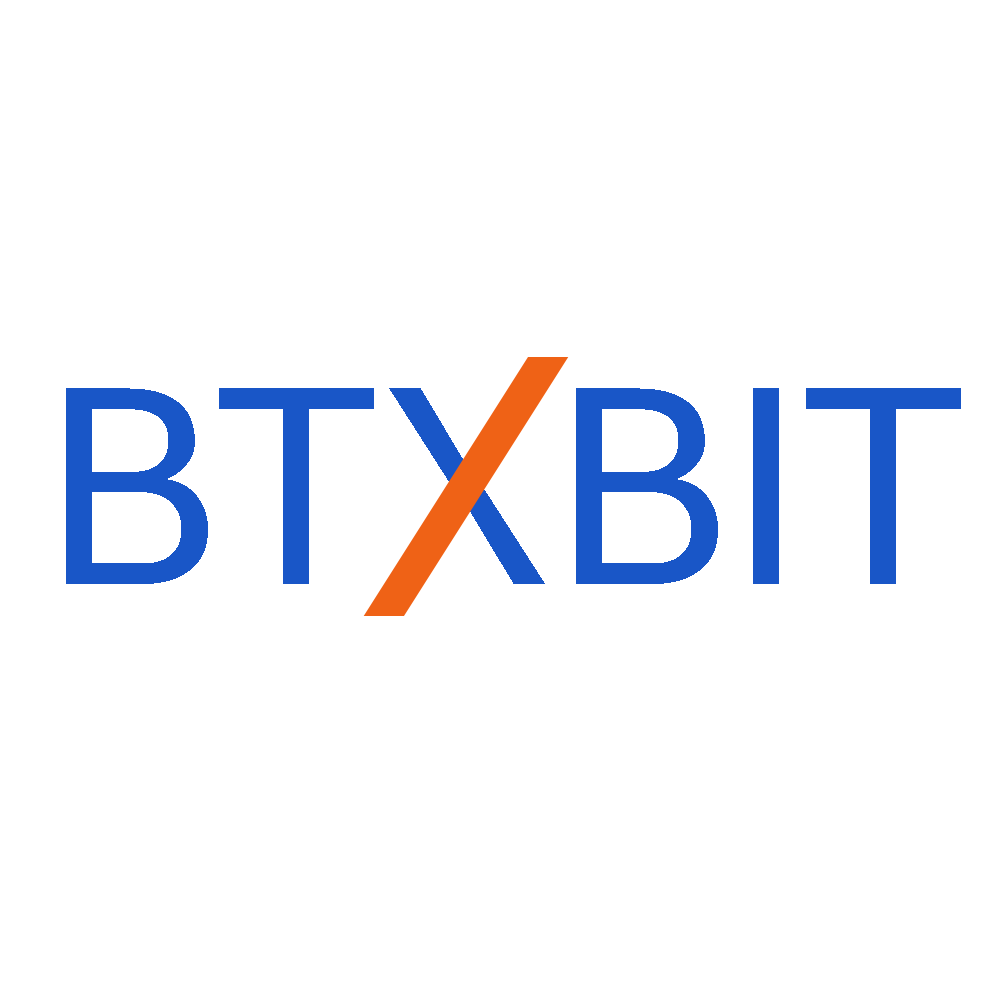
<style>
.page{position:relative;width:1000px;height:1000px;background:#ffffff}
.page>*{position:absolute;margin:0}
.t1{font:275px "Roboto-Regular";color:#1956c7}
</style>
<div class="page">
<p class="t1" style="left:66px;top:388px;width:895px;height:196px">BTXBIT</p>
</div>
